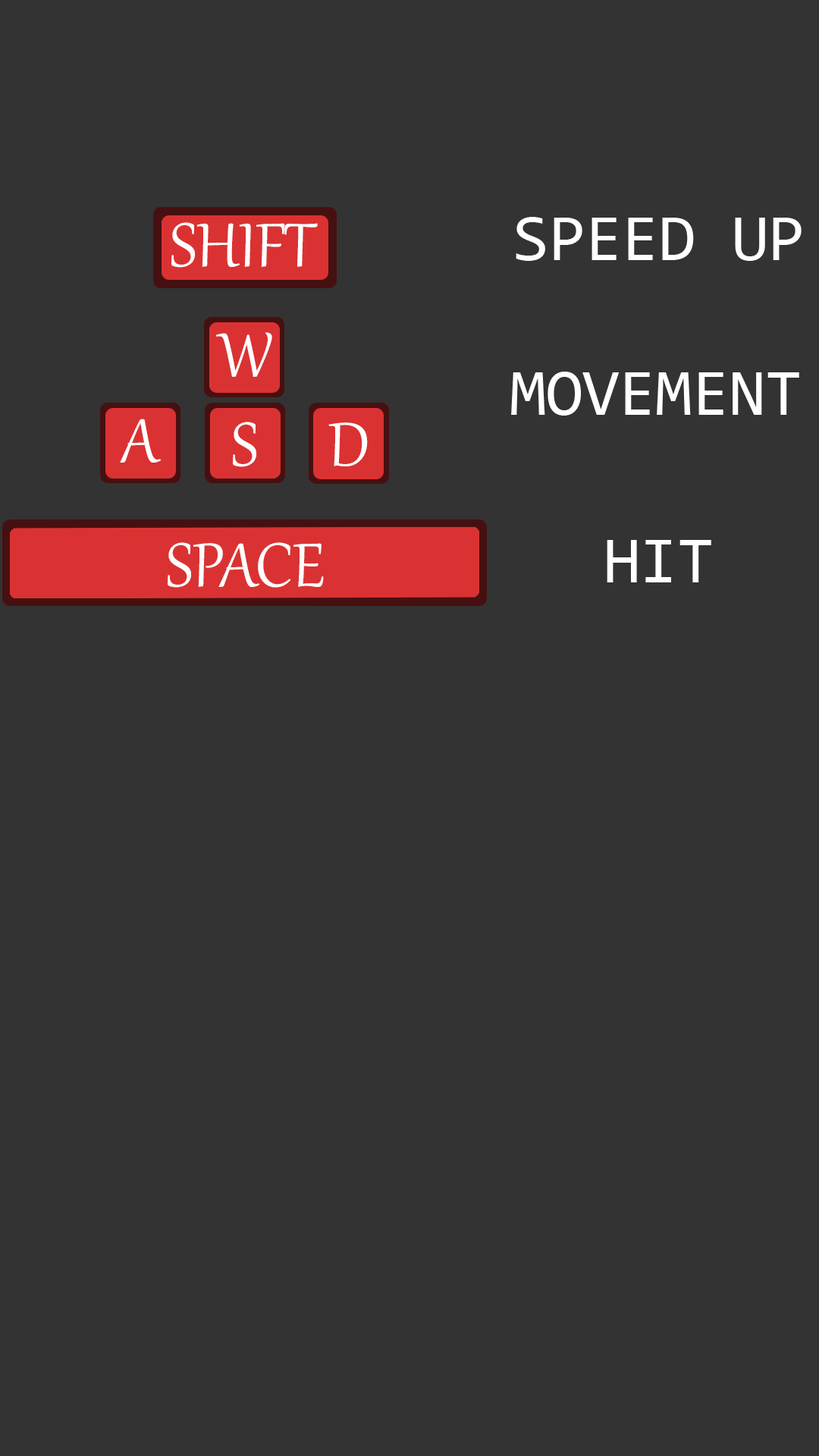
<style>
.page{position:relative;width:819px;height:1456px;background:#333333}
.page>*{position:absolute;margin:0}
.t1{font:66.4px "Consolas";color:#ffffff}
.t2{font:75.8px "Gabriola";color:#ffffff}
</style>
<div class="page">
<p class="t1" style="left:516px;top:217px;width:286px;height:44px">SPEED UP</p>
<p class="t2" style="left:171px;top:222px;width:147px;height:46px">SHIFT</p>
<p class="t2" style="left:216px;top:332px;width:56px;height:45px">W</p>
<p class="t1" style="left:511px;top:372px;width:288px;height:44px">MOVEMENT</p>
<p class="t2" style="left:120px;top:419px;width:41px;height:44px">A</p>
<p class="t2" style="left:233px;top:422px;width:23px;height:45px">S</p>
<p class="t2" style="left:328px;top:422px;width:40px;height:44px">D</p>
<p class="t2" style="left:168px;top:542px;width:156px;height:46px">SPACE</p>
<p class="t1" style="left:607px;top:540px;width:104px;height:42px">HIT</p>
</div>
